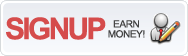
<style>
.page{position:relative;width:188px;height:56px}
.page>*{position:absolute;margin:0}
.t1{font:30px "Arial-BoldMT";letter-spacing:-0.09em;color:#d54c4c}
.t2{font:10px/10px "ArialMT";letter-spacing:-0.04em;color:#444444}
</style>
<div class="page">
<p class="t1" style="left:6px;top:17px;width:100px;height:23px">SIGNUP</p>
<p class="t2" style="left:108px;top:20px;width:37px;height:18px;text-align:center">EARN<br>MONEY!</p>
</div>
